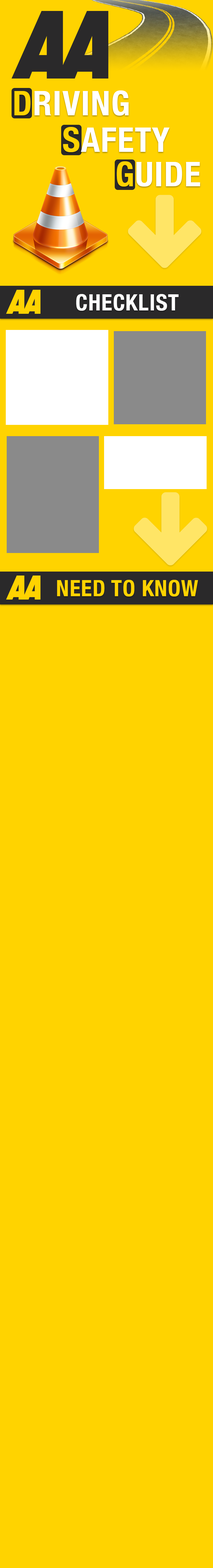
<style>
.page{position:relative;width:213px;height:1568px;background:#ffd300}
.page>*{position:absolute;margin:0}
.t1{font:34.2px "HelveticaNeue-CondensedBold";letter-spacing:0.025em;color:#ffffff;text-transform:uppercase}
.t2{font:34.2px "HelveticaNeue-CondensedBold";letter-spacing:0.025em;color:#ffd300;text-transform:uppercase}
.t3{font:22.6px "HelveticaNeue-CondensedBold";letter-spacing:0.025em;color:#ffffff;text-transform:uppercase}
.t4{font:22.6px "HelveticaNeue-CondensedBold";letter-spacing:0.025em;color:#ffd300;text-transform:uppercase}
</style>
<div class="page">
<p class="t1" style="left:14px;top:90px;width:115px;height:26px"><span class="t2">D</span>riving</p>
<p class="t1" style="left:63px;top:127px;width:107px;height:25px"><span class="t2">S</span>afety</p>
<p class="t1" style="left:117px;top:161px;width:83px;height:26px"><span class="t2">G</span>uide</p>
<p class="t3" style="left:76px;top:294px;width:103px;height:17px">Checklist</p>
<p class="t4" style="left:57px;top:580px;width:141px;height:17px">need to know</p>
</div>
